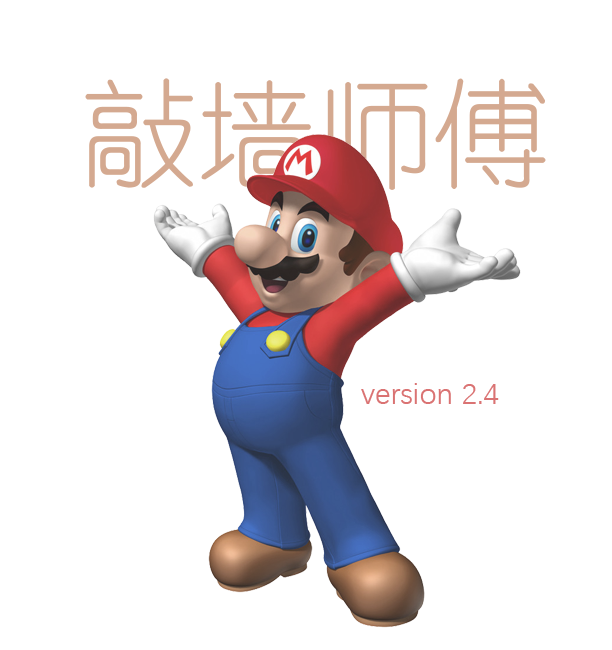
<style>
.page{position:relative;width:612px;height:650px;background:#ffffff}
.page>*{position:absolute;margin:0}
.t1{font:117.5px "YouYuan";color:#d4a990}
.t2{font:30px "DengXian";color:#da7373}
</style>
<div class="page">
<p class="t1" style="left:85px;top:78px;width:461px;height:112px">敲墙师傅</p>
<p class="t2" style="left:361px;top:383px;width:138px;height:21px">version 2.4</p>
</div>
